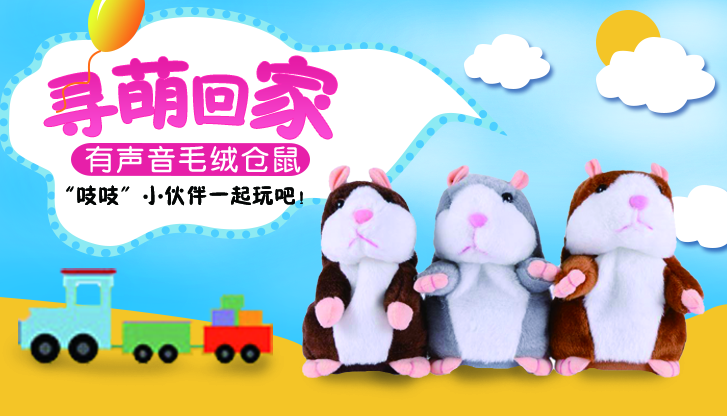
<style>
.page{position:relative;width:727px;height:416px}
.page>*{position:absolute;margin:0}
.t1{font:72px "FZSEJW--GB1-0";letter-spacing:-0.1em;color:#ff28ba}
.t2{font:80px "FZSEJW--GB1-0";letter-spacing:-0.1em;color:#ff28ba}
.t3{font:60px "FZSEJW--GB1-0";letter-spacing:-0.1em;color:#ff28ba}
.t4{font:89px "FZSEJW--GB1-0";letter-spacing:-0.1em;color:#ff28ba}
.t5{font:28px "FZY3JW--GB1-0";letter-spacing:0.1em;color:#ffffff}
.t6{font:22px "FZSEJW--GB1-0";color:#040606}
</style>
<div class="page">
<p class="t1" style="left:44px;top:56px;width:293px;height:83px">寻<span class="t2">萌</span><span class="t3">回</span><span class="t4">家</span></p>
<p class="t5" style="left:85px;top:145px;width:216px;height:28px">有声音毛绒仓鼠</p>
<p class="t6" style="left:66px;top:185px;width:237px;height:21px">“吱吱”小伙伴一起玩吧！</p>
</div>
